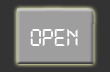
<style>
.page{position:relative;width:110px;height:72px;background:#9f9e9e}
.page>*{position:absolute;margin:0}
.t1{font:26px "DS-Digital";letter-spacing:-0.025em;color:#ffffff}
</style>
<div class="page">
<p class="t1" style="left:30px;top:29px;width:48px;height:17px">open</p>
</div>
